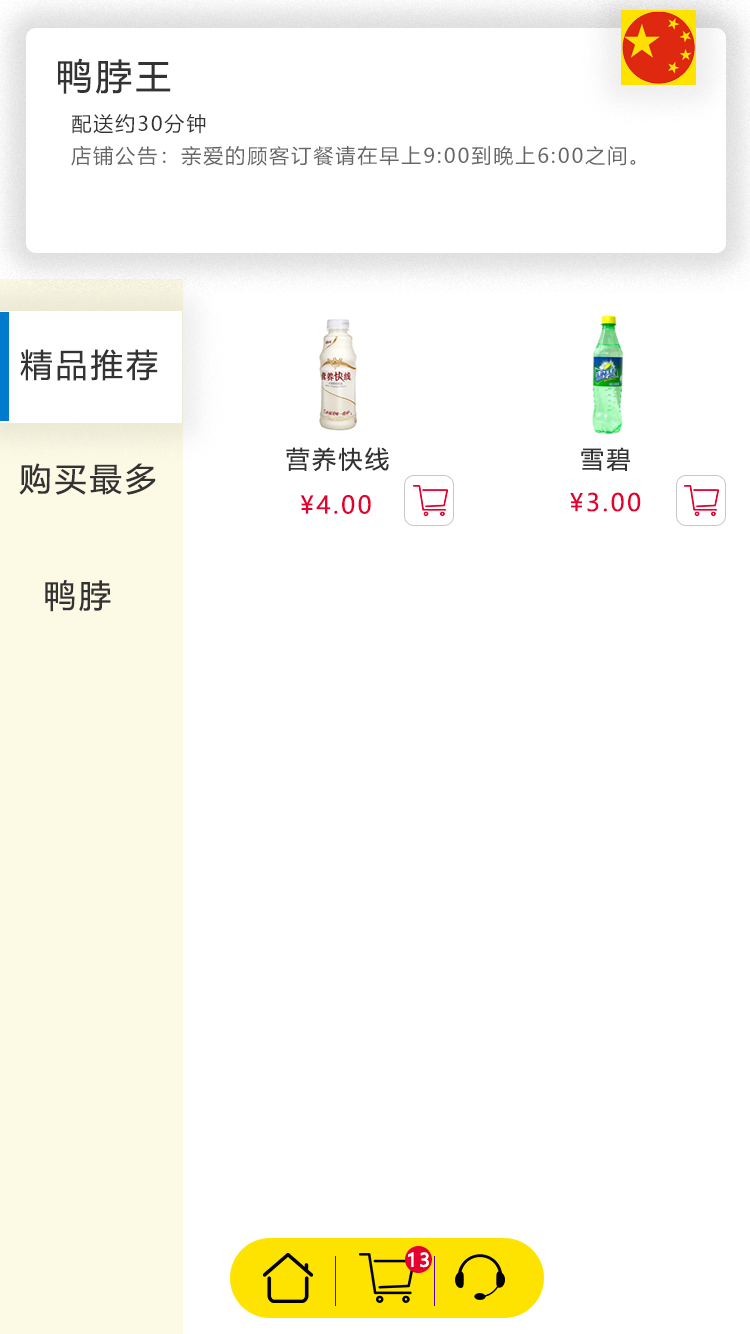
<style>
.page{position:relative;width:750px;height:1334px;background:#ffffff}
.page>*{position:absolute;margin:0}
.t1{font:36px "MicrosoftYaHei";letter-spacing:0.1em;color:#333333}
.t2{font:20px "MicrosoftYaHei";letter-spacing:0.1em;color:#333333}
.t3{font:20px "MicrosoftYaHei";letter-spacing:0.1em;color:#666666}
.t4{font:32px "MicrosoftYaHei";letter-spacing:0.1em;color:#333333}
.t5{font:24px "MicrosoftYaHei";letter-spacing:0.1em;color:#333333}
.t6{font:24px "MicrosoftYaHei";letter-spacing:0.1em;color:#e4002f}
.t7{font:18px "MicrosoftYaHei";letter-spacing:0.1em;color:#ffffff;font-weight:bold}
</style>
<div class="page">
<p class="t1" style="left:58px;top:58px;width:113px;height:36px">鸭脖王</p>
<p class="t2" style="left:72px;top:114px;width:134px;height:20px">配送约30分钟</p>
<p class="t3" style="left:71px;top:145px;width:565px;height:21px">店铺公告：亲爱的顾客订餐请在早上9:00到晚上6:00之间。</p>
<p class="t4" style="left:20px;top:349px;width:138px;height:32px">精品推荐</p>
<p class="t5" style="left:286px;top:447px;width:103px;height:24px">营养快线</p>
<p class="t5" style="left:581px;top:447px;width:49px;height:24px">雪碧</p>
<p class="t4" style="left:19px;top:463px;width:137px;height:32px">购买最多</p>
<p class="t6" style="left:300px;top:495px;width:71px;height:19px">¥4.00</p>
<p class="t6" style="left:570px;top:492px;width:71px;height:20px">¥3.00</p>
<p class="t4" style="left:45px;top:580px;width:66px;height:32px">鸭脖</p>
<p class="t7" style="left:408px;top:1252px;width:21px;height:16px">13</p>
</div>
